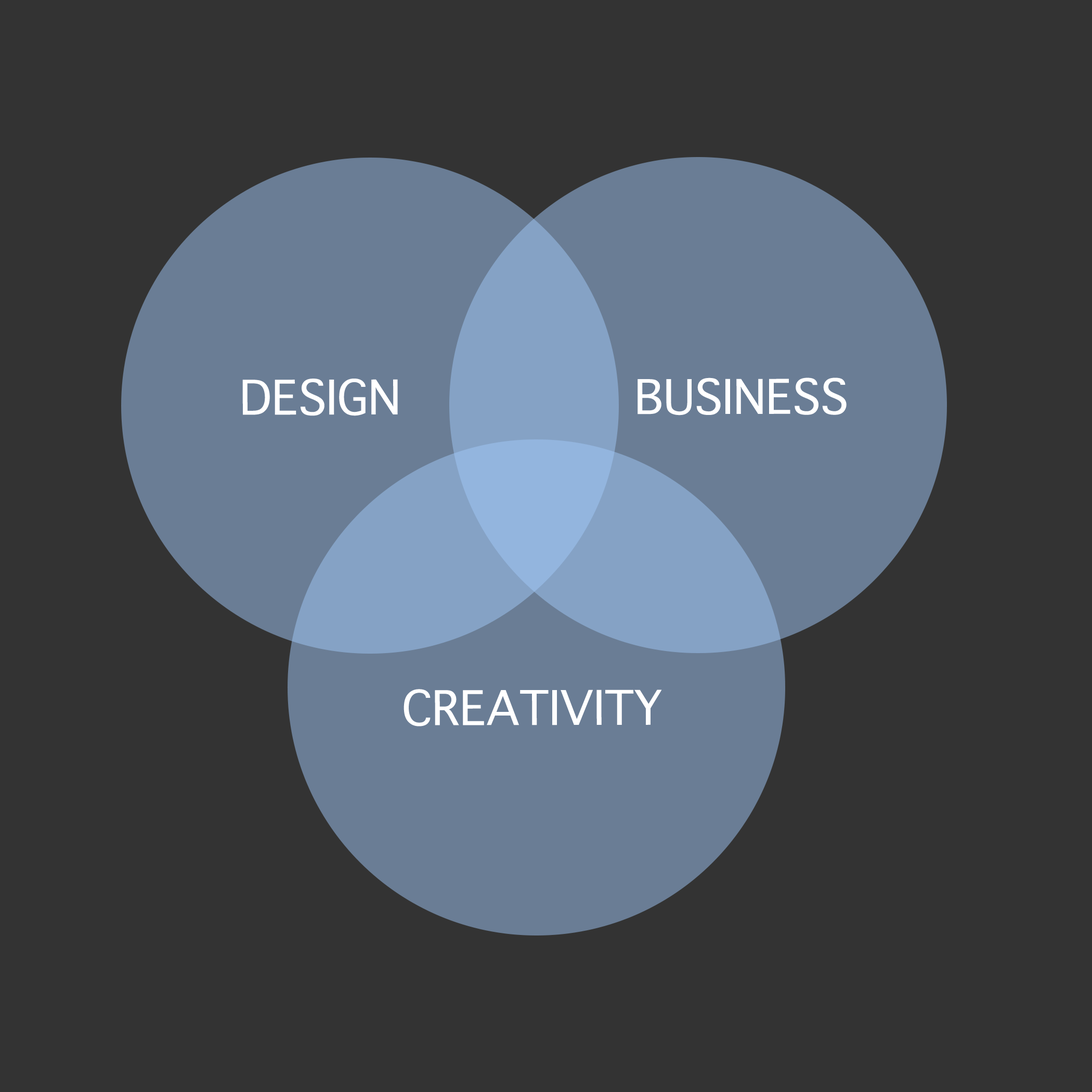
<style>
.page{position:relative;width:1092px;height:1092px;background:#333333}
.page>*{position:absolute;margin:0}
.t1{font:64.7px "AppleSymbols";color:#ffffff}
</style>
<div class="page">
<p class="t1" style="left:638px;top:378px;width:209px;height:37px">BUSINESS</p>
<p class="t1" style="left:242px;top:379px;width:156px;height:37px">DESIGN</p>
<p class="t1" style="left:404px;top:689px;width:258px;height:37px">CREATIVITY</p>
</div>
